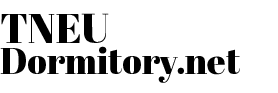
<style>
.page{position:relative;width:278px;height:93px;background:#ffffff}
.page>*{position:absolute;margin:0}
.t1{font:41.3px "AbrilFatface-Regular";color:#000000}
.t2{font:36px "AbrilFatface-Regular";color:#000000}
</style>
<div class="page">
<p class="t1" style="left:1px;top:13px;width:108px;height:30px">TNEU</p>
<p class="t2" style="left:0px;top:46px;width:240px;height:37px">Dormitory.net</p>
</div>
